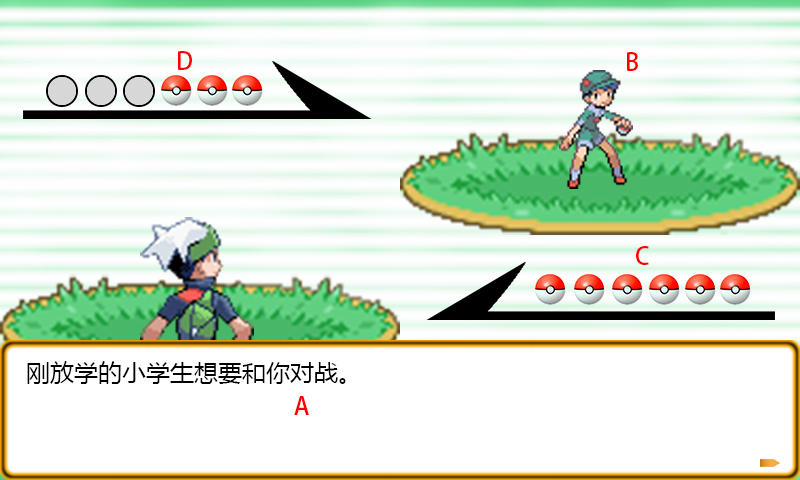
<style>
.page{position:relative;width:800px;height:480px;background:#ffffff}
.page>*{position:absolute;margin:0}
.t1{font:24px "AdobeHeitiStd-Regular";color:#ff0000}
.t2{font:24px "MicrosoftYaHeiUI";color:#000000}
</style>
<div class="page">
<p class="t1" style="left:178px;top:51px;width:14px;height:19px">D</p>
<p class="t1" style="left:627px;top:52px;width:11px;height:19px">B</p>
<p class="t1" style="left:636px;top:246px;width:13px;height:19px">C</p>
<p class="t2" style="left:27px;top:361px;width:319px;height:23px">刚放学的小学生想要和你对战。</p>
<p class="t1" style="left:294px;top:396px;width:15px;height:19px">A</p>
</div>
